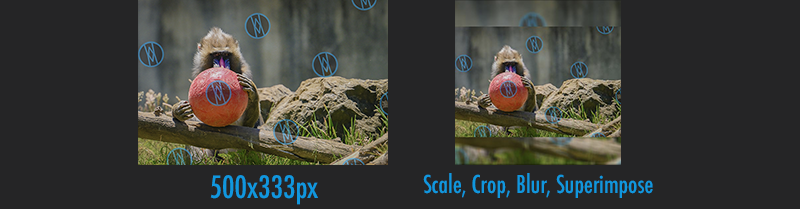
<style>
.page{position:relative;width:800px;height:209px;background:#252526}
.page>*{position:absolute;margin:0}
.t1{font:24px "Futura-CondensedMedium";color:#1097de}
.t2{font:30px "Futura-CondensedMedium";color:#1097de}
</style>
<div class="page">
<p class="t1" style="left:423px;top:173px;width:230px;height:25px">Scale, Crop, Blur, Superimpose</p>
<p class="t2" style="left:210px;top:175px;width:108px;height:30px">500x333px</p>
</div>
